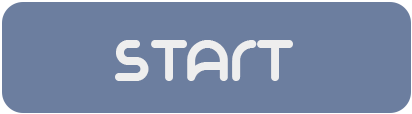
<style>
.page{position:relative;width:412px;height:114px;background:#6c7e9f}
.page>*{position:absolute;margin:0}
.t1{font:62.5px "Organocoloredversionat:logomagazin.comorgano-font";letter-spacing:-0.02em;color:#eeeeee}
</style>
<div class="page">
<p class="t1" style="left:115px;top:40px;width:178px;height:41px">START</p>
</div>
